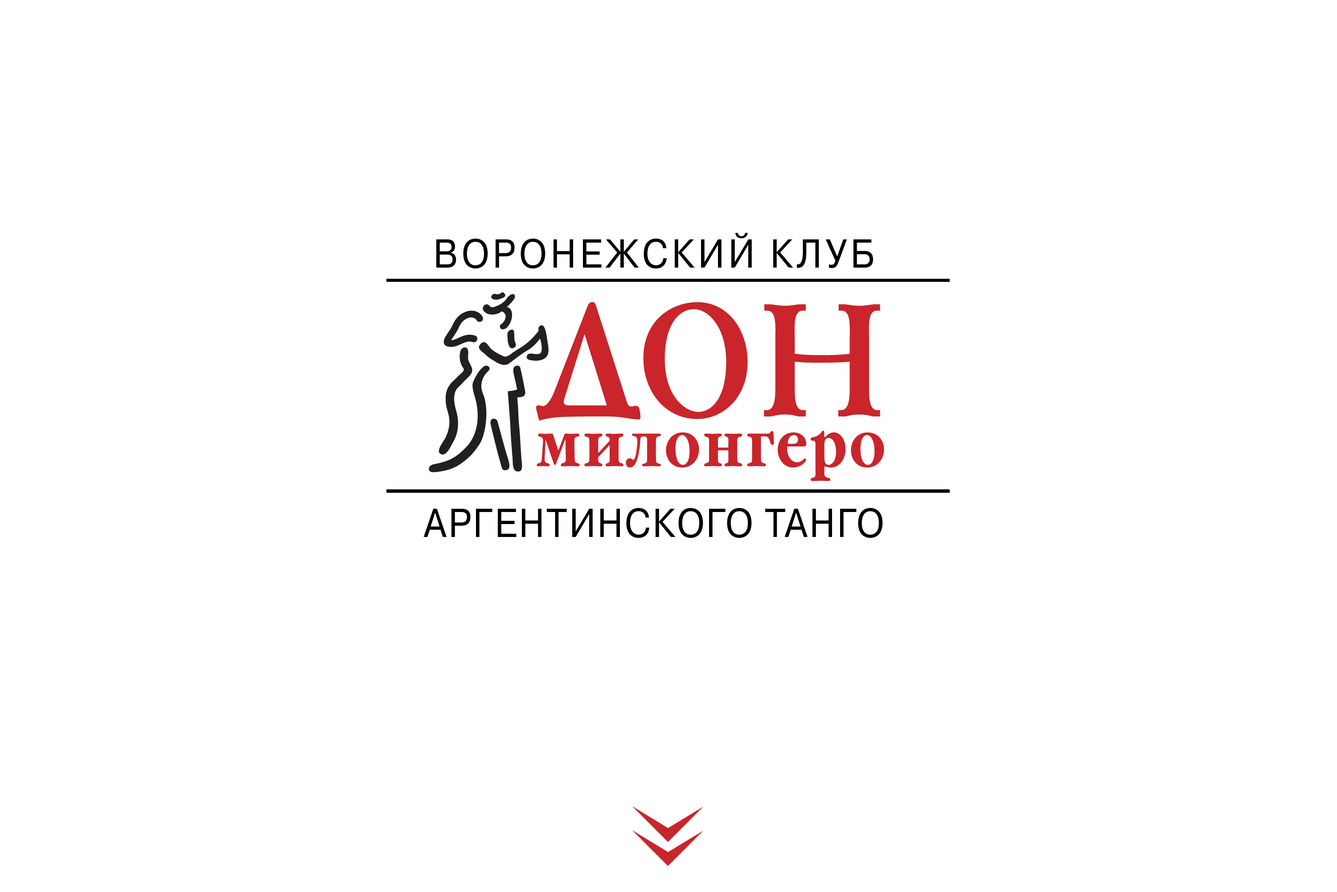
<style>
.page{position:relative;width:1337px;height:892px;background:#ffffff}
.page>*{position:absolute;margin:0}
.t1{font:40.3px "PragmaticaC";letter-spacing:0.1em;color:#010101;scale:0.9 1}
.t2{font:40.3px "PragmaticaC";letter-spacing:0.05em;color:#010101;scale:0.9 1}
</style>
<div class="page">
<p class="t1" style="left:436px;top:233px;width:437px;height:35px">ВОРОНЕЖСКИЙ КЛУБ</p>
<p class="t2" style="left:424px;top:508px;width:459px;height:30px">АРГЕНТИНСКОГО ТАНГО</p>
</div>
